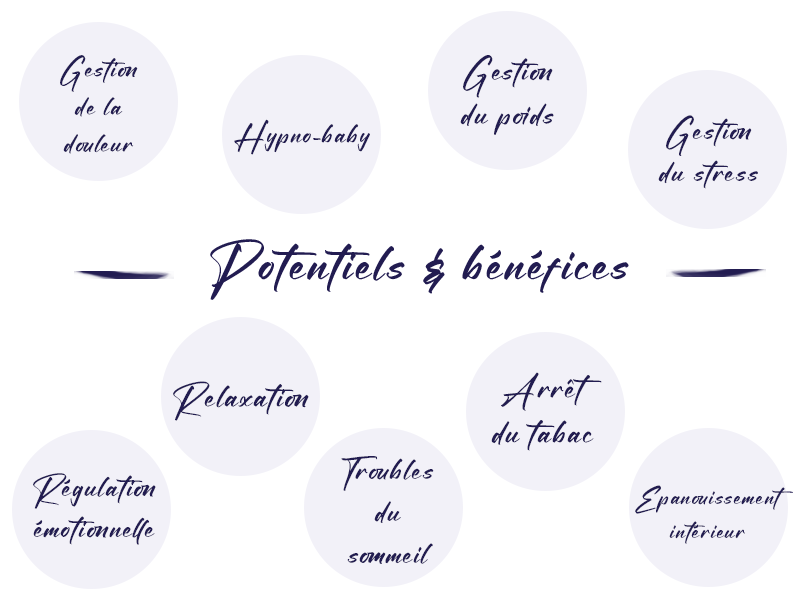
<style>
.page{position:relative;width:800px;height:600px;background:#ffffff}
.page>*{position:absolute;margin:0}
.t1{font:31.2px/37.4px "Blacklist";letter-spacing:0.05em;color:#221c51}
.t2{font:36.2px/43.4px "Blacklist";letter-spacing:0.05em;color:#221c51}
.t3{font:31.6px "Blacklist";letter-spacing:0.05em;color:#221c51}
.t4{font:34.5px/41.4px "Blacklist";letter-spacing:0.05em;color:#221c51}
.t5{font:60px "Blacklist";letter-spacing:0.05em;color:#221c51}
.t6{font:38.1px/45.7px "Blacklist";letter-spacing:0.05em;color:#221c51}
.t7{font:38px "Blacklist";letter-spacing:0.05em;color:#221c51}
.t8{font:35.2px/42.2px "Blacklist";letter-spacing:0.05em;color:#221c51}
.t9{font:34.7px/41.6px "Blacklist";letter-spacing:0.05em;color:#221c51}
.t10{font:27.8px/33.4px "Blacklist";letter-spacing:0.05em;color:#221c51}
</style>
<div class="page">
<p class="t1" style="left:60px;top:55px;width:78px;height:99px;text-align:center">Gestion<br>de la<br>douleur</p>
<p class="t2" style="left:460px;top:55px;width:94px;height:80px;text-align:center">Gestion<br>du poids</p>
<p class="t3" style="left:234px;top:119px;width:136px;height:36px">Hypno-baby</p>
<p class="t4" style="left:658px;top:115px;width:100px;height:74px;text-align:center">Gestion<br>du stress</p>
<p class="t5" style="left:210px;top:239px;width:419px;height:61px">Potentiels &amp; bénéfices</p>
<p class="t6" style="left:491px;top:372px;width:111px;height:79px;text-align:center">Arrêt<br>du tabac</p>
<p class="t7" style="left:173px;top:381px;width:136px;height:40px">Relaxation</p>
<p class="t8" style="left:341px;top:456px;width:93px;height:108px;text-align:center">Troubles <br>du<br>sommeil</p>
<p class="t9" style="left:33px;top:473px;width:123px;height:72px;text-align:center">Régulation<br>émotionnelle</p>
<p class="t10" style="left:635px;top:485px;width:158px;height:59px;text-align:center">Epanouissement<br>intérieur</p>
</div>
